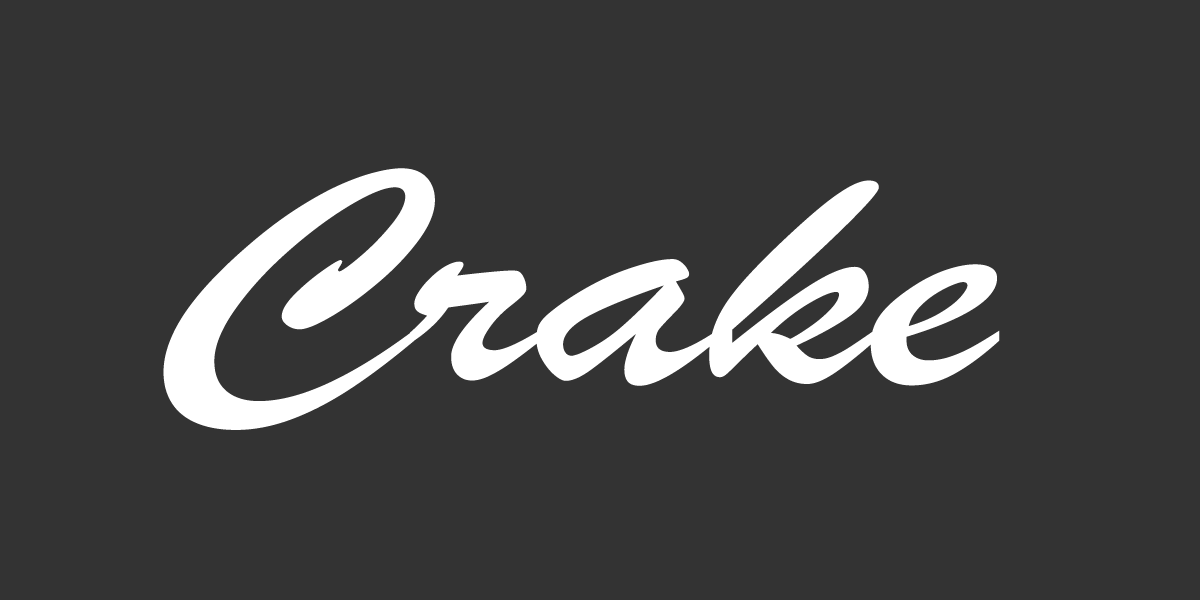
<style>
.page{position:relative;width:1200px;height:600px;background:#333333}
.page>*{position:absolute;margin:0}
.t1{font:325.7px "BrushScriptMT";color:#ffffff;scale:1.33 1}
</style>
<div class="page">
<p class="t1" style="left:163px;top:168px;width:837px;height:262px">Crake</p>
</div>
